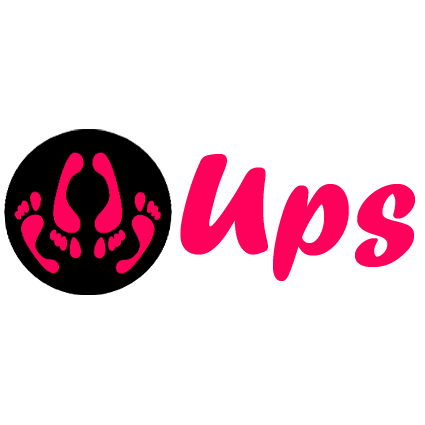
<style>
.page{position:relative;width:425px;height:425px;background:#ffffff}
.page>*{position:absolute;margin:0}
.t1{font:147.7px "ForteMT";color:#ff005a}
</style>
<div class="page">
<p class="t1" style="left:180px;top:154px;width:235px;height:127px">Ups</p>
</div>
